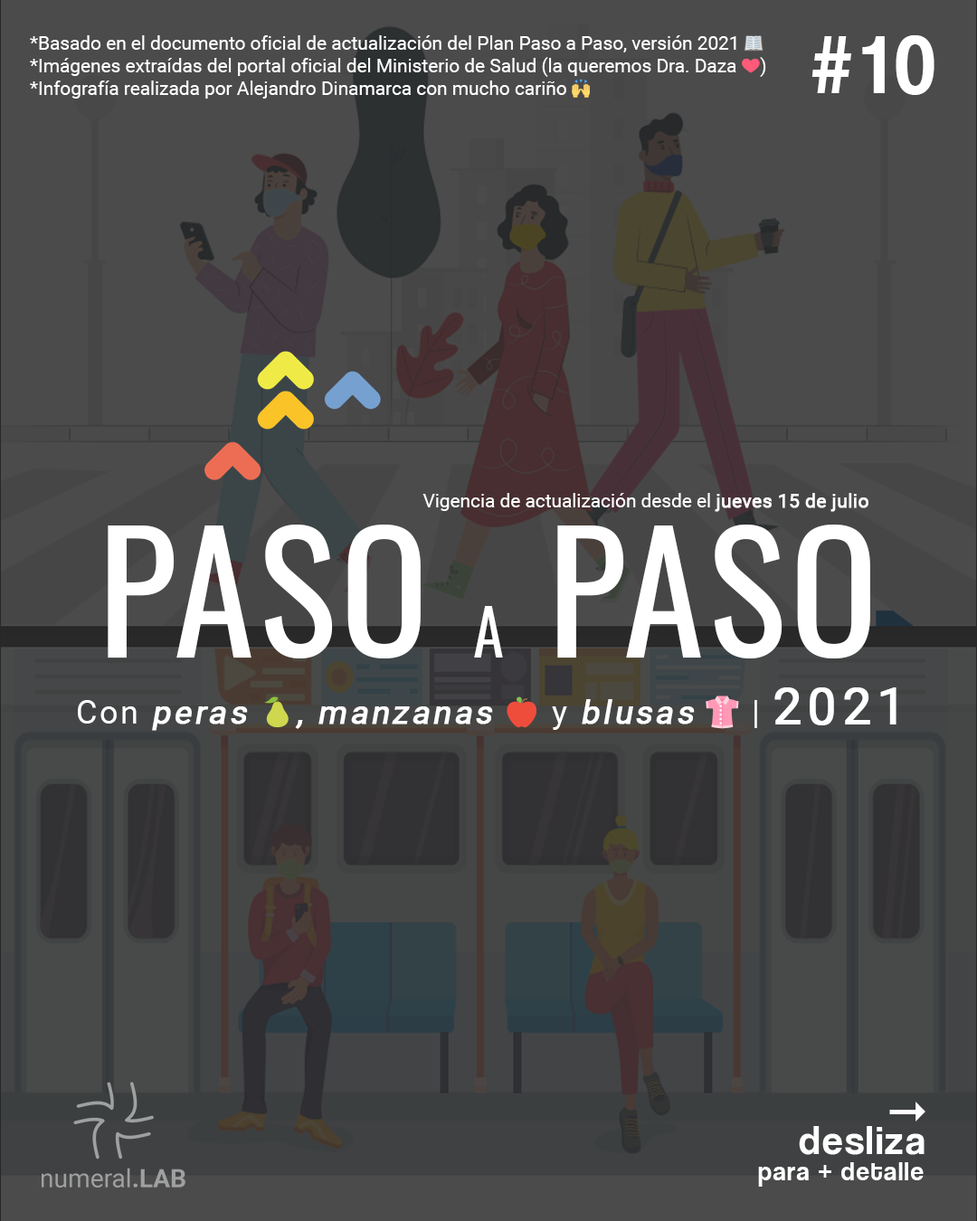
<style>
.page{position:relative;width:977px;height:1221px;background:#4b4b4b}
.page>*{position:absolute;margin:0}
.t1{font:18.8px "Roboto-Regular";color:#ffffff}
.t2{font:18.8px "EmojiOneColor";color:#ffffff}
.t3{font:83.5px "CoolveticaRg-Regular";letter-spacing:0.1em;color:#ffffff}
.t4{font:18.8px "Roboto-Regular";color:#ffffff;font-weight:bold}
.t5{font:163.3px "Oswald-Regular";letter-spacing:0.025em;color:#ffffff}
.t6{font:62.8px "Oswald-Regular";letter-spacing:0.025em;color:#ffffff}
.t7{font:32.3px "Roboto-Regular";letter-spacing:0.075em;color:#ffffff;font-weight:bold;font-style:italic}
.t8{font:32.3px "Roboto-Regular";letter-spacing:0.075em;color:#ffffff}
.t9{font:32.3px "EmojiOneColor";letter-spacing:0.075em;color:#ffffff;font-weight:bold;font-style:italic}
.t10{font:32.3px "EmojiOneColor";letter-spacing:0.075em;color:#ffffff}
.t11{font:50.2px "Roboto-Regular";letter-spacing:0.1em;color:#ffffff;font-weight:bold}
.t12{font:51.6px "Arrows";letter-spacing:0.05em;color:#ffffff}
.t13{font:40.7px "CoolveticaRg-Regular";letter-spacing:0.05em;color:#ffffff}
.t14{font:26.4px "CoolveticaRg-Regular";letter-spacing:0.05em;color:#ffffff}
</style>
<div class="page">
<p class="t1" style="left:30px;top:35px;width:736px;height:64px">*Basado en el documento oficial de actualización del Plan Paso a Paso, versión 2021 <span class="t2">📖<br></span>*Imágenes extraídas del portal oficial del Ministerio de Salud (la queremos Dra. Daza <span class="t2">❤</span>)<br>*Infografía realizada por Alejandro Dinamarca con mucho cariño <span class="t2">🙌</span></p>
<p class="t3" style="left:811px;top:35px;width:123px;height:60px">#10</p>
<p class="t1" style="left:422px;top:493px;width:446px;height:19px">Vigencia de actualización desde el <span class="t4">jueves 15 de julio</span></p>
<p class="t5" style="left:108px;top:525px;width:762px;height:133px">PASO <span class="t6">A</span> PASO</p>
<p class="t7" style="left:78px;top:687px;width:818px;height:44px"><span class="t8">Con </span>peras <span class="t9">🍐</span>, manzanas <span class="t9">🍎</span><span class="t8"> y </span>blusas <span class="t10">👚</span><span class="t8"> | </span><span class="t11">2021</span></p>
<p class="t12" style="left:889px;top:1102px;width:36px;height:19px">A</p>
<p class="t13" style="left:799px;top:1126px;width:125px;height:29px">desliza</p>
<p class="t14" style="left:758px;top:1162px;width:165px;height:25px">para + detalle</p>
</div>
